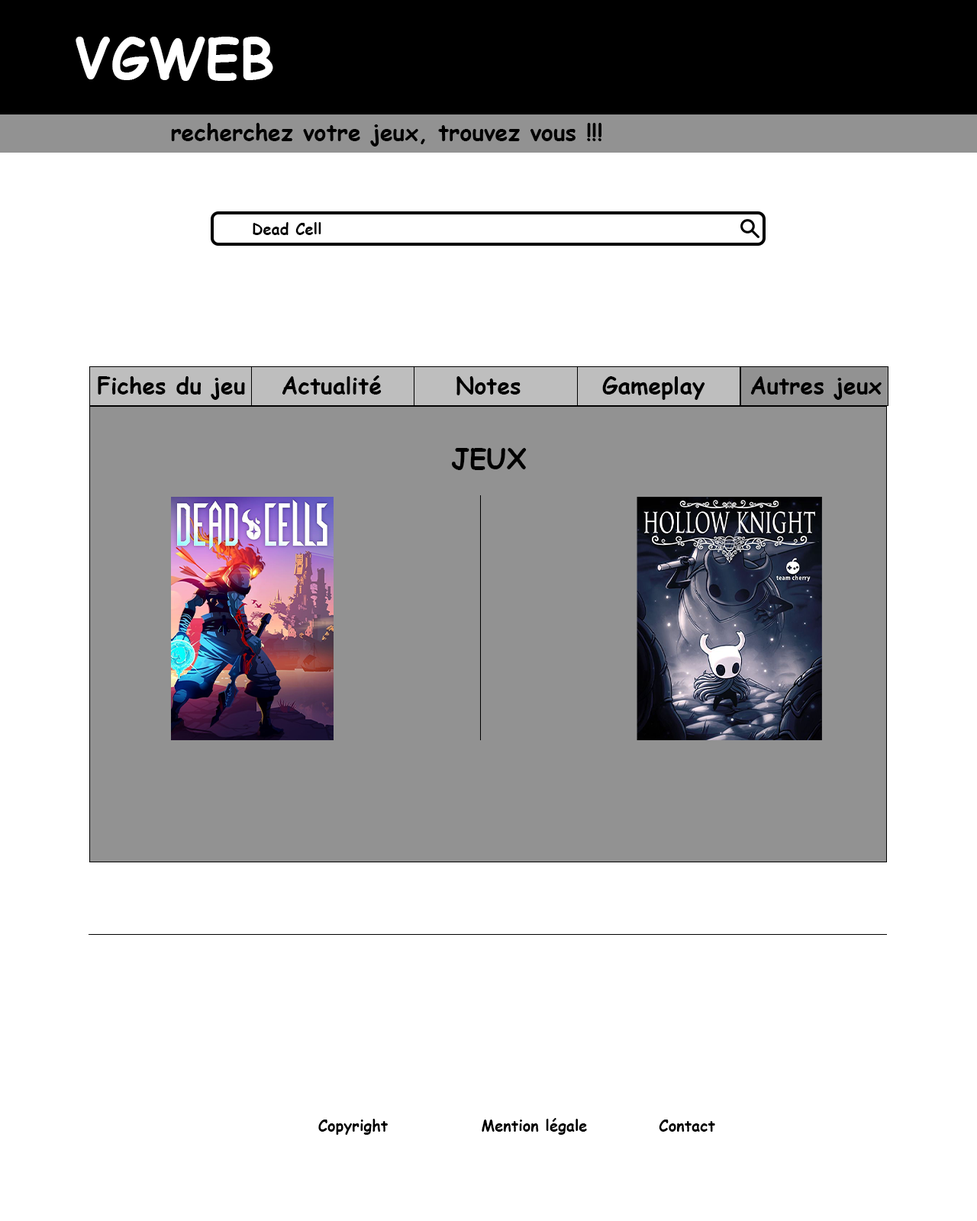
<style>
.page{position:relative;width:977px;height:1221px;background:#ffffff}
.page>*{position:absolute;margin:0}
.t1{font:54.9px "ComicSansMS-Bold";color:#ffffff}
.t2{font:22.9px "ComicSansMS-Bold";color:#000000}
.t3{font:15.3px "ComicSansMS-Bold";color:#000000}
.t4{font:27.5px "ComicSansMS-Bold";color:#000000}
</style>
<div class="page">
<p class="t1" style="left:76px;top:37px;width:197px;height:44px">VGWEB</p>
<p class="t2" style="left:171px;top:123px;width:430px;height:24px">recherchez votre jeux, trouvez vous !!!</p>
<p class="t3" style="left:253px;top:222px;width:68px;height:13px">Dead Cell</p>
<p class="t2" style="left:98px;top:376px;width:147px;height:24px">Fiches du jeu</p>
<p class="t2" style="left:282px;top:375px;width:100px;height:19px">Actualité</p>
<p class="t2" style="left:456px;top:376px;width:64px;height:19px">Notes</p>
<p class="t2" style="left:602px;top:376px;width:103px;height:24px">Gameplay</p>
<p class="t2" style="left:750px;top:376px;width:131px;height:24px">Autres jeux</p>
<p class="t4" style="left:452px;top:448px;width:75px;height:22px">JEUX</p>
<p class="t3" style="left:318px;top:1119px;width:70px;height:16px">Copyright</p>
<p class="t3" style="left:481px;top:1118px;width:106px;height:17px">Mention légale</p>
<p class="t3" style="left:659px;top:1119px;width:56px;height:13px">Contact</p>
</div>
